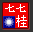
<style>
.page{position:relative;width:33px;height:32px;background:#f20000}
.page>*{position:absolute;margin:0}
.t1{font:10.4px "SimSun";color:#ffffff}
.t2{font:11.7px "SimSun";color:#ffffff}
</style>
<div class="page">
<p class="t1" style="left:5px;top:4px;width:21px;height:8px">七七</p>
<p class="t2" style="left:16px;top:15px;width:11px;height:12px">桂</p>
</div>
